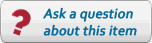
<style>
.page{position:relative;width:152px;height:43px;background:#f3f3f3}
.page>*{position:absolute;margin:0}
.t1{font:14px/17px "Corbel";color:#03689b;font-weight:bold;font-style:italic}
</style>
<div class="page">
<p class="t1" style="left:43px;top:7px;width:94px;height:29px">Ask a question<br>about this item</p>
</div>
